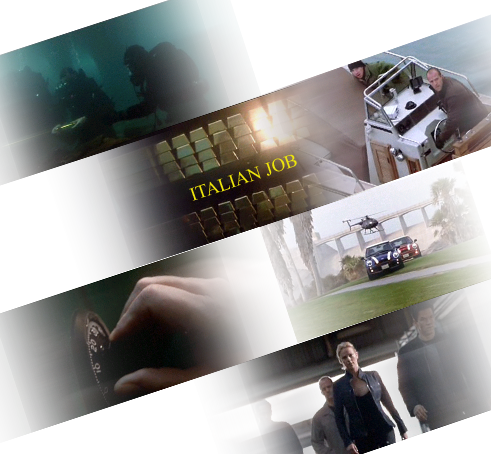
<style>
.page{position:relative;width:491px;height:454px}
.page>*{position:absolute;margin:0}
.t1{font:18.7px "TimesNewRomanPSMT";color:#ede50b}
</style>
<div class="page">
<p class="t1" style="left:189px;top:154px;width:108px;height:47px;rotate:-19deg">ITALIAN JOB</p>
</div>
